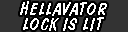
<style>
.page{position:relative;width:128px;height:32px;background:#333333}
.page>*{position:absolute;margin:0}
.t1{font:18px/15px "DomDiagonalBT-Regular";letter-spacing:0.05em;color:#ffffff}
</style>
<div class="page">
<p class="t1" style="left:20px;top:1px;width:87px;height:30px;text-align:center">HELLAVATOR<br>LOCK IS LIT</p>
</div>
